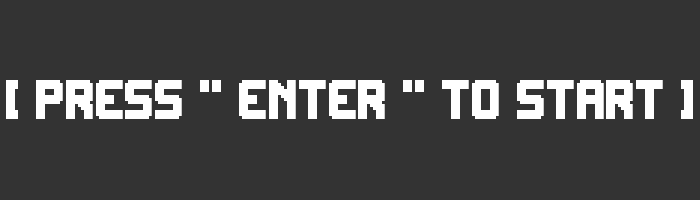
<style>
.page{position:relative;width:700px;height:200px;background:#333333}
.page>*{position:absolute;margin:0}
.t1{font:48px "Round9x13";color:#ffffff}
</style>
<div class="page">
<p class="t1" style="left:6px;top:80px;width:687px;height:39px">[ PRESS " ENTER " TO START ]</p>
</div>
